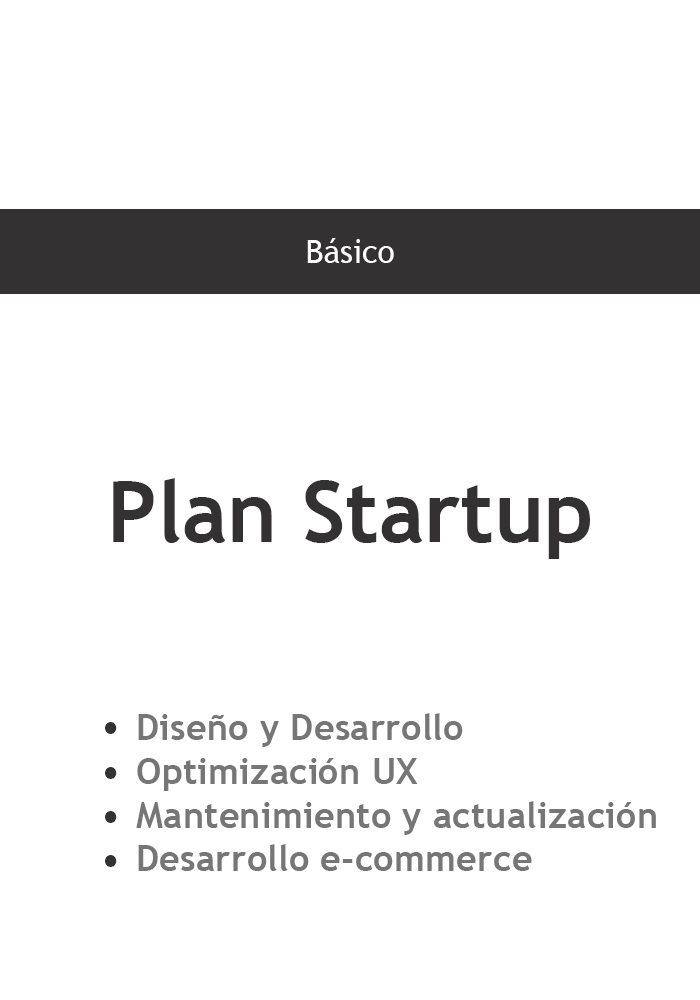
<style>
.page{position:relative;width:700px;height:1000px;background:#ffffff}
.page>*{position:absolute;margin:0}
.t1{font:31.8px "TrebuchetMS";color:#ffffff}
.t2{font:84.7px "TrebuchetMS-Bold";color:#333131}
.t3{font:36.4px "TrebuchetMS-Bold";color:#777676}
.t4{font:95.2px "MyriadPro-Regular";color:#333131}
</style>
<div class="page">
<p class="t1" style="left:307px;top:238px;width:87px;height:25px">Básico</p>
<p class="t2" style="left:113px;top:478px;width:477px;height:81px">Plan Startup</p>
<p class="t3" style="left:136px;top:713px;width:520px;height:158px">Diseño y Desarrollo<br>Optimización UX<br>Mantenimiento y actualización<br>Desarrollo e-commerce</p>
<p class="t4" style="left:105px;top:722px;width:12px;height:12px">.</p>
<p class="t4" style="left:105px;top:767px;width:12px;height:12px">.</p>
<p class="t4" style="left:105px;top:811px;width:12px;height:12px">.</p>
<p class="t4" style="left:105px;top:855px;width:12px;height:12px">.</p>
</div>
